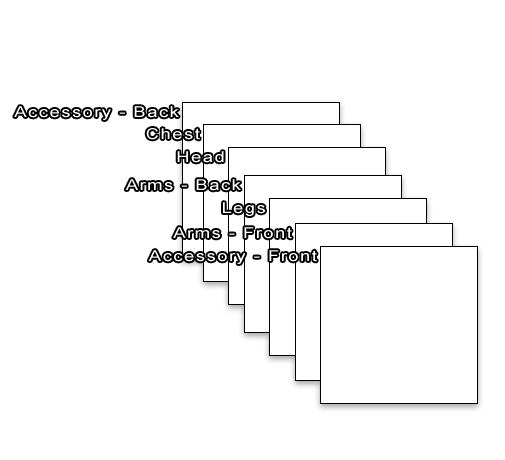
<style>
.page{position:relative;width:505px;height:460px;background:#ffffff}
.page>*{position:absolute;margin:0}
.t1{font:15px "ArialMT";letter-spacing:0.075em;color:#ffffff;scale:1.24 1}
</style>
<div class="page">
<p class="t1" style="left:14px;top:106px;width:165px;height:14px">Accessory - Back</p>
<p class="t1" style="left:146px;top:128px;width:54px;height:12px">Chest</p>
<p class="t1" style="left:177px;top:151px;width:47px;height:12px">Head</p>
<p class="t1" style="left:125px;top:179px;width:116px;height:12px">Arms - Back</p>
<p class="t1" style="left:223px;top:202px;width:42px;height:14px">Legs</p>
<p class="t1" style="left:173px;top:227px;width:119px;height:12px">Arms - Front</p>
<p class="t1" style="left:148px;top:250px;width:169px;height:14px">Accessory - Front</p>
</div>
